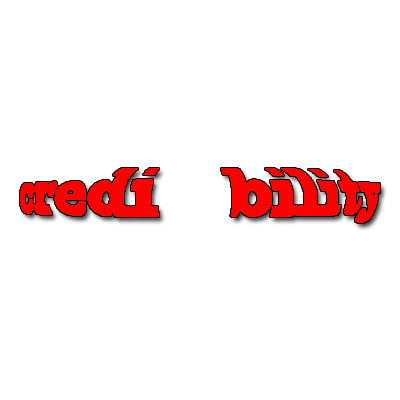
<style>
.page{position:relative;width:400px;height:400px;background:#ffffff}
.page>*{position:absolute;margin:0}
.t1{font:54.7px "BlackoakStd";color:#ff0000;scale:0.46 1}
</style>
<div class="page">
<p class="t1" style="left:20px;top:168px;width:360px;height:55px">credi    bility</p>
</div>
